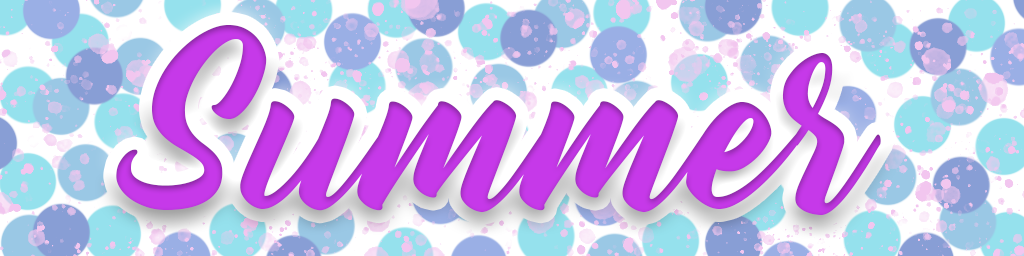
<style>
.page{position:relative;width:1024px;height:256px}
.page>*{position:absolute;margin:0}
.t1{font:215.1px "Bernadette";color:#c639e9}
</style>
<div class="page">
<p class="t1" style="left:116px;top:25px;width:765px;height:190px">Summer</p>
</div>
